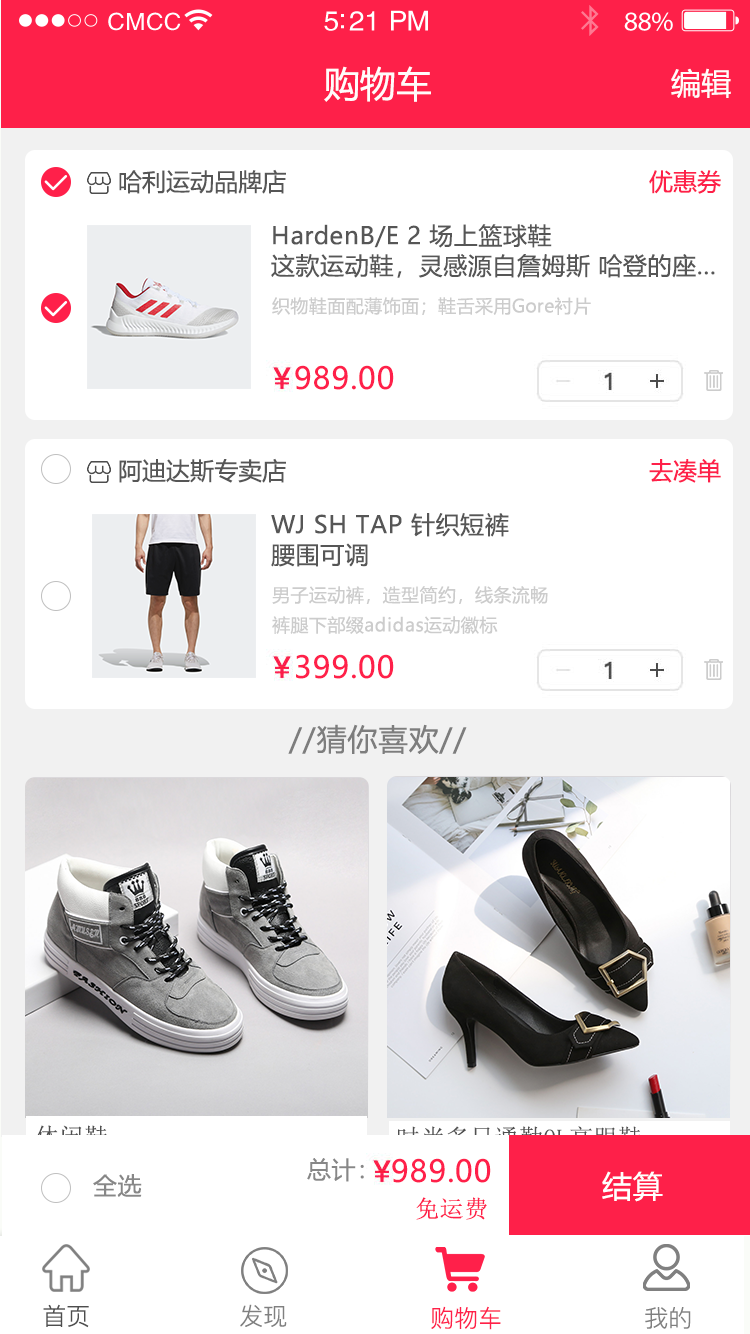
<style>
.page{position:relative;width:750px;height:1334px;background:#ffffff}
.page>*{position:absolute;margin:0}
.t1{font:36px "MicrosoftYaHei";letter-spacing:0.002em;color:#fffbfb}
.t2{font:30px "MicrosoftYaHei";letter-spacing:0.002em;color:#fffbfb}
.t3{font:24px "MicrosoftYaHei";letter-spacing:0.002em;color:#565656}
.t4{font:24px "MicrosoftYaHei";letter-spacing:0.002em;color:#fe2049}
.t5{font:24px/30px "MicrosoftYaHei";letter-spacing:0.025em;color:#565656}
.t6{font:18px "MicrosoftYaHei";letter-spacing:0.025em;color:#cccccc}
.t7{font:30px "MicrosoftYaHei";letter-spacing:0.025em;color:#ff204a}
.t8{font:18px/30px "MicrosoftYaHei";letter-spacing:0.025em;color:#cccccc}
.t9{font:30px "MicrosoftYaHei";letter-spacing:0.025em;color:#7d7d7d}
.t10{font:24px "SimSun";letter-spacing:0.025em}
.t11{font:24px "MicrosoftYaHei";letter-spacing:0.025em;color:#878787}
.t12{font:30px "MicrosoftYaHei";letter-spacing:0.025em;color:#ffffff}
.t13{font:24px "SimSun";letter-spacing:0.025em;color:#ff204a}
</style>
<div class="page">
<p class="t1" style="left:324px;top:66px;width:107px;height:36px">购物车</p>
<p class="t2" style="left:671px;top:68px;width:60px;height:30px">编辑</p>
<p class="t3" style="left:119px;top:169px;width:167px;height:25px">哈利运动品牌店</p>
<p class="t4" style="left:649px;top:170px;width:72px;height:24px">优惠券</p>
<p class="t5" style="left:271px;top:224px;width:444px;height:54px">HardenB/E 2 场上篮球鞋<br>这款运动鞋，灵感源自詹姆斯 哈登的座...</p>
<p class="t6" style="left:272px;top:297px;width:319px;height:18px">织物鞋面配薄饰面；鞋舌采用Gore衬片</p>
<p class="t7" style="left:295px;top:365px;width:99px;height:25px">989.00</p>
<p class="t3" style="left:119px;top:458px;width:167px;height:25px">阿迪达斯专卖店</p>
<p class="t4" style="left:649px;top:459px;width:72px;height:24px">去凑单</p>
<p class="t5" style="left:271px;top:513px;width:238px;height:54px">WJ SH TAP 针织短裤<br>腰围可调</p>
<p class="t8" style="left:272px;top:586px;width:276px;height:48px">男子运动裤，造型简约，线条流畅<br>裤腿下部缀adidas运动徽标</p>
<p class="t7" style="left:296px;top:654px;width:98px;height:25px">399.00</p>
<p class="t9" style="left:288px;top:724px;width:179px;height:30px">//猜你喜欢//</p>
<p class="t10" style="left:35px;top:1125px;width:73px;height:23px">休闲鞋</p>
<p class="t10" style="left:398px;top:1126px;width:243px;height:23px">时尚多日通勤OL高跟鞋</p>
<p class="t11" style="left:307px;top:1158px;width:57px;height:24px">总计：</p>
<p class="t7" style="left:392px;top:1158px;width:99px;height:25px">989.00</p>
<p class="t11" style="left:93px;top:1174px;width:49px;height:23px">全选</p>
<p class="t12" style="left:602px;top:1171px;width:61px;height:31px">结算</p>
<p class="t13" style="left:416px;top:1197px;width:71px;height:23px">免运费</p>
</div>
